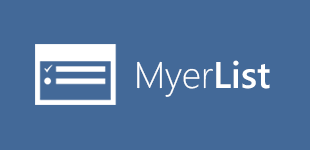
<style>
.page{position:relative;width:310px;height:150px;background:#436998}
.page>*{position:absolute;margin:0}
.t1{font:37.2px "SegoeWP-Light";color:#ffffff}
.t2{font:37.2px "SegoeWP-Semibold";color:#ffffff}
</style>
<div class="page">
<p class="t1" style="left:137px;top:60px;width:133px;height:37px">Myer<span class="t2">List</span></p>
</div>
